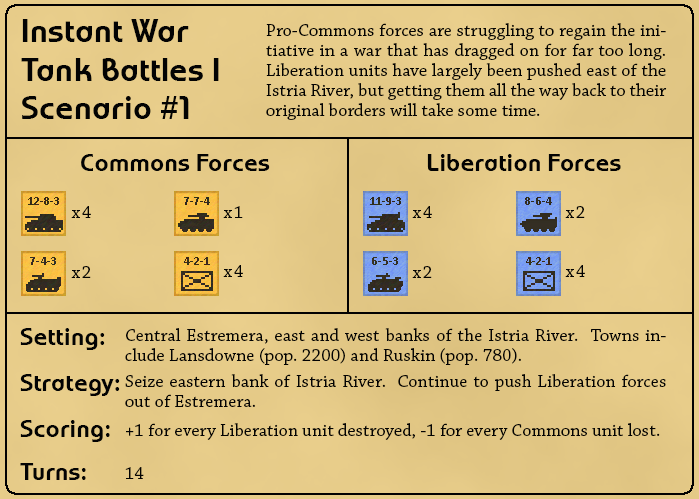
<style>
.page{position:relative;width:699px;height:499px}
.page>*{position:absolute;margin:0}
.t1{font:32px "WorldofWater-Regular";letter-spacing:0.01em;color:#030303}
.t2{font:18px/20px "ChaparralPro-Regular";letter-spacing:0.01em;color:#030303}
.t3{font:24px "WorldofWater-Regular";letter-spacing:0.01em;color:#030303}
.t4{font:18px "ChaparralPro-Regular";letter-spacing:0.1em;color:#030303}
.t5{font:18px "ChaparralPro-Regular";letter-spacing:0.01em;color:#030303}
</style>
<div class="page">
<p class="t1" style="left:21px;top:19px;width:198px;height:100px">Instant War<br>Tank Battles I<br>Scenario #1</p>
<p class="t2" style="left:266px;top:23px;width:401px;height:97px;text-align:justify">Pro-Commons forces are struggling to regain the initiative in a war that has dragged on for far too long.  Liberation units have largely been pushed east of the Istria River, but getting them all the way back to their original borders will take some time.</p>
<p class="t3" style="left:81px;top:154px;width:189px;height:17px">Commons Forces</p>
<p class="t3" style="left:427px;top:154px;width:194px;height:17px">Liberation Forces</p>
<p class="t4" style="left:71px;top:206px;width:20px;height:12px">x4</p>
<p class="t4" style="left:223px;top:206px;width:20px;height:12px">x1</p>
<p class="t4" style="left:412px;top:206px;width:20px;height:12px">x4</p>
<p class="t4" style="left:565px;top:206px;width:20px;height:12px">x2</p>
<p class="t4" style="left:71px;top:266px;width:20px;height:12px">x2</p>
<p class="t4" style="left:223px;top:265px;width:20px;height:12px">x4</p>
<p class="t4" style="left:412px;top:266px;width:20px;height:12px">x2</p>
<p class="t4" style="left:565px;top:265px;width:20px;height:12px">x4</p>
<p class="t3" style="left:20px;top:328px;width:85px;height:22px">Setting:</p>
<p class="t2" style="left:125px;top:328px;width:541px;height:37px;text-align:justify">Central Estremera, east and west banks of the Istria River.  Towns include Lansdowne (pop. 2200) and Ruskin (pop. 780).</p>
<p class="t3" style="left:20px;top:374px;width:100px;height:22px">Strategy:</p>
<p class="t2" style="left:125px;top:374px;width:541px;height:33px;text-align:justify">Seize eastern bank of Istria River.  Continue to push Liberation forces out of Estremera.</p>
<p class="t3" style="left:20px;top:420px;width:90px;height:22px">Scoring:</p>
<p class="t5" style="left:126px;top:423px;width:534px;height:17px">+1 for every Liberation unit destroyed, -1 for every Commons unit lost.</p>
<p class="t3" style="left:20px;top:463px;width:66px;height:17px">Turns:</p>
<p class="t5" style="left:125px;top:467px;width:19px;height:12px">14</p>
</div>
